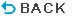
<style>
.page{position:relative;width:76px;height:16px;background:#ffffff}
.page>*{position:absolute;margin:0}
.t1{font:14px "ArialMT";letter-spacing:0.1em;color:#444444;font-weight:bold}
</style>
<div class="page">
<p class="t1" style="left:21px;top:3px;width:44px;height:10px">BACK</p>
</div>
